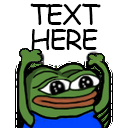
<style>
.page{position:relative;width:128px;height:128px;background:#ffffff}
.page>*{position:absolute;margin:0}
.t1{font:27.6px/24.6px "ComicSansMS";letter-spacing:-0.054em;color:#000000}
</style>
<div class="page">
<p class="t1" style="left:30px;top:3px;width:71px;height:47px;text-align:center">TEXT HERE</p>
<p class="t1" style="left:30px;top:3px;width:71px;height:47px;text-align:center">TEXT<br>HERE</p>
</div>
